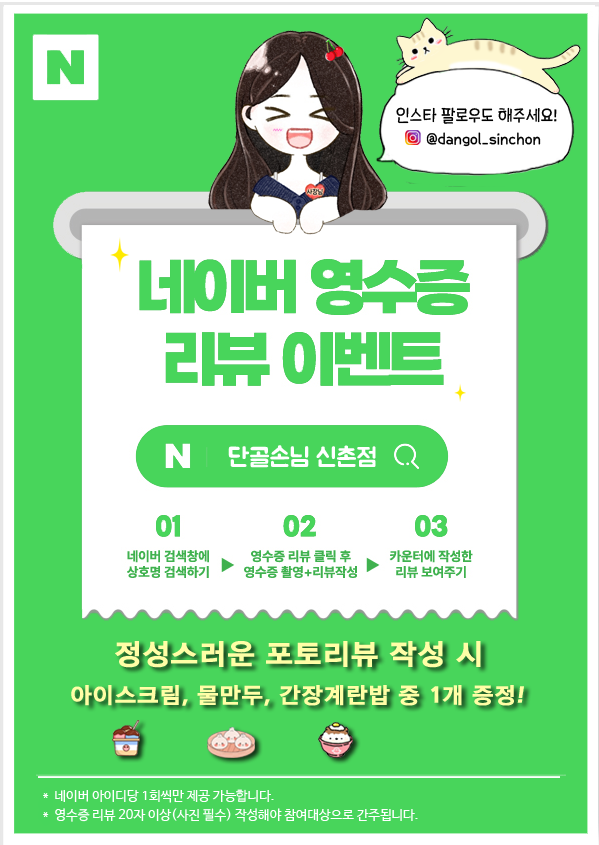
<style>
.page{position:relative;width:599px;height:845px;background:#48d55b}
.page>*{position:absolute;margin:0}
.t1{font:18px "THEMiss";color:#000000}
.t2{font:16px "THEMiss";color:#000000}
.t3{font:26px "Pix_BMJUAOTF";color:#ffffff}
.t4{font:28px "Pix_HUJingo162";color:#fffea6}
.t5{font:22px "Pix_HUJingo162";color:#fffea6}
.t6{font:13px "NanumBarunGothic";color:#ffffff}
</style>
<div class="page">
<p class="t1" style="left:396px;top:107px;width:161px;height:17px">인스타 팔로우도 해주세요!</p>
<p class="t2" style="left:426px;top:132px;width:115px;height:15px">@dangol_sinchon</p>
<p class="t3" style="left:228px;top:445px;width:148px;height:23px">단골손님 신촌점</p>
<p class="t4" style="left:115px;top:641px;width:366px;height:27px">정성스러운 포토리뷰 작성 시</p>
<p class="t5" style="left:71px;top:685px;width:453px;height:21px">아이스크림, 물만두, 간장계란밥 중 1개 증정!</p>
<p class="t6" style="left:43px;top:789px;width:231px;height:14px">*  네이버 아이디당 1회씩만 제공 가능합니다.</p>
<p class="t6" style="left:43px;top:808px;width:375px;height:14px">*  영수증 리뷰 20자 이상(사진 필수) 작성해야 참여대상으로 간주됩니다.</p>
</div>
